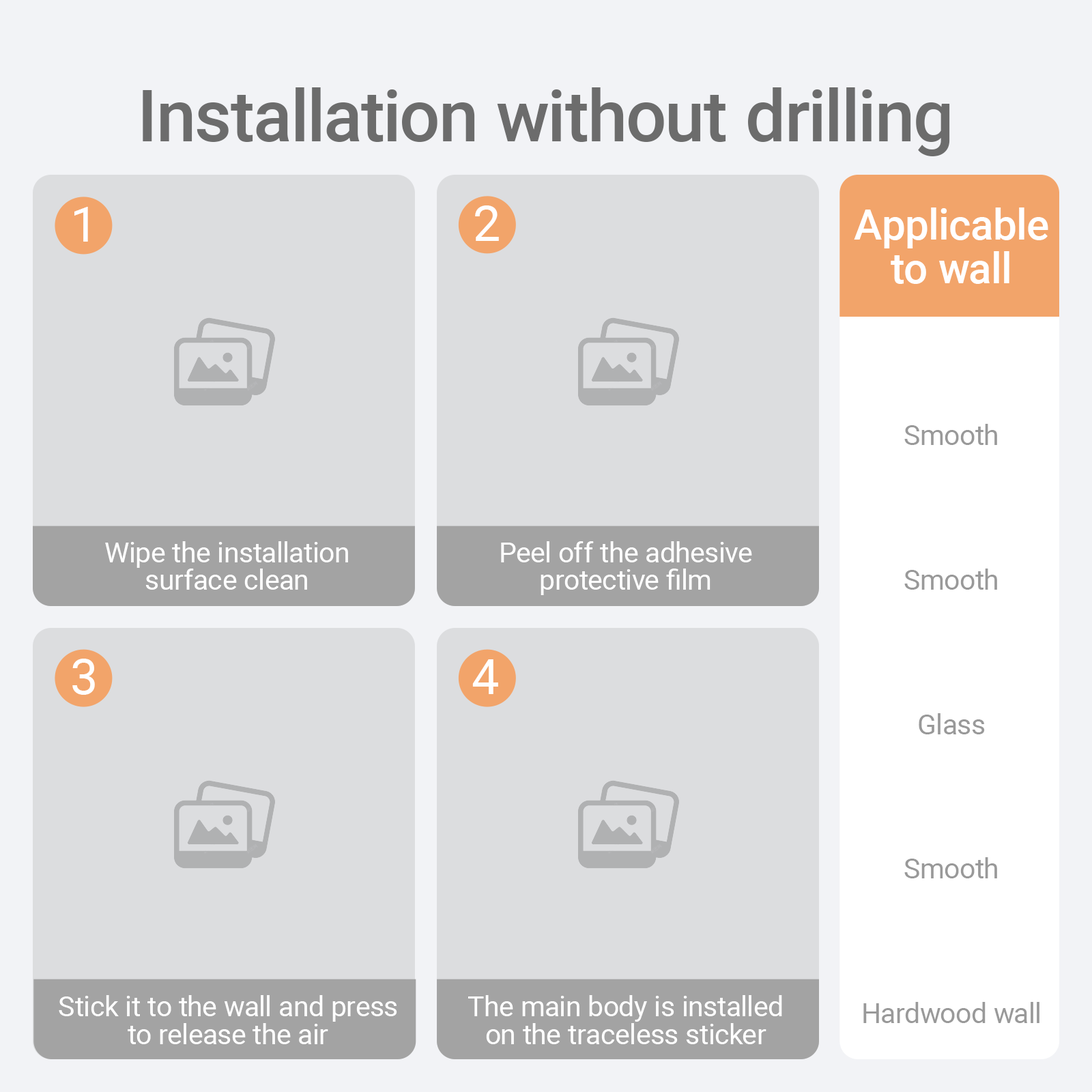
<style>
.page{position:relative;width:1092px;height:1092px;background:#dcdddf}
.page>*{position:absolute;margin:0}
.t1{font:71.3px "Roboto-Medium";color:#6c6c6c}
.t2{font:49.1px "Roboto-Regular";color:#ffffff}
.t3{font:42.2px/43.7px "Roboto-Medium";color:#ffffff}
.t4{font:27.7px "Roboto-Regular";color:#999999}
.t5{font:27.7px/27.7px "Roboto-Regular";color:#ffffff}
</style>
<div class="page">
<p class="t1" style="left:143px;top:87px;width:807px;height:69px">Installation without drilling</p>
<p class="t2" style="left:74px;top:207px;width:14px;height:35px">1</p>
<p class="t2" style="left:475px;top:205px;width:24px;height:36px">2</p>
<p class="t3" style="left:854px;top:207px;width:194px;height:77px;text-align:center">Applicable<br>to wall</p>
<p class="t4" style="left:904px;top:424px;width:93px;height:21px">Smooth</p>
<p class="t5" style="left:105px;top:541px;width:243px;height:49px;text-align:center">Wipe the installation<br>surface clean</p>
<p class="t5" style="left:501px;top:541px;width:251px;height:54px;text-align:center">Peel off the adhesive<br>protective film</p>
<p class="t4" style="left:904px;top:569px;width:93px;height:21px">Smooth</p>
<p class="t2" style="left:72px;top:659px;width:23px;height:36px">3</p>
<p class="t2" style="left:472px;top:659px;width:26px;height:35px">4</p>
<p class="t4" style="left:919px;top:713px;width:66px;height:21px">Glass</p>
<p class="t4" style="left:904px;top:857px;width:93px;height:21px">Smooth</p>
<p class="t5" style="left:59px;top:995px;width:338px;height:49px;text-align:center">Stick it to the wall and press<br>to release the air</p>
<p class="t5" style="left:468px;top:995px;width:314px;height:49px;text-align:center">The main body is installed<br>on the traceless sticker</p>
<p class="t4" style="left:863px;top:1002px;width:176px;height:21px">Hardwood wall</p>
</div>
